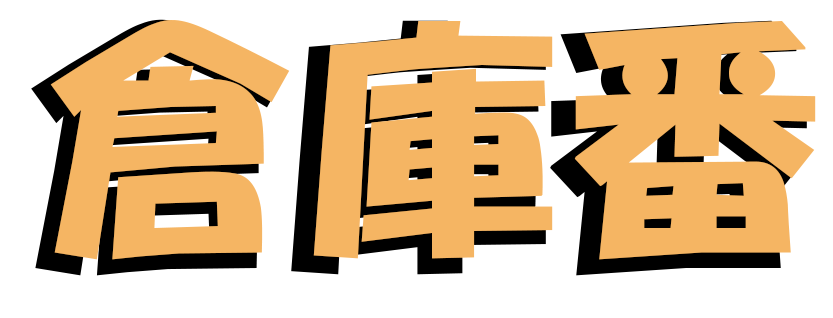
<style>
.page{position:relative;width:833px;height:318px;background:#f5b563}
.page>*{position:absolute;margin:0}
.t1{font:266.7px "HGPSoeiKakupoptai";letter-spacing:-0.025em;color:#f5b563}
.t2{font:250px "HGPSoeiKakupoptai";letter-spacing:0.05em;color:#f5b563}
</style>
<div class="page">
<p class="t1" style="left:31px;top:19px;width:776px;height:257px">倉庫番</p>
<p class="t2" style="left:50px;top:20px;width:766px;height:240px">倉庫番</p>
</div>
